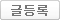
<style>
.page{position:relative;width:60px;height:20px;background:#ffffff}
.page>*{position:absolute;margin:0}
.t1{font:12px "Dotum";color:#757575;font-weight:bold}
</style>
<div class="page">
<p class="t1" style="left:11px;top:5px;width:37px;height:11px">글등록</p>
</div>
